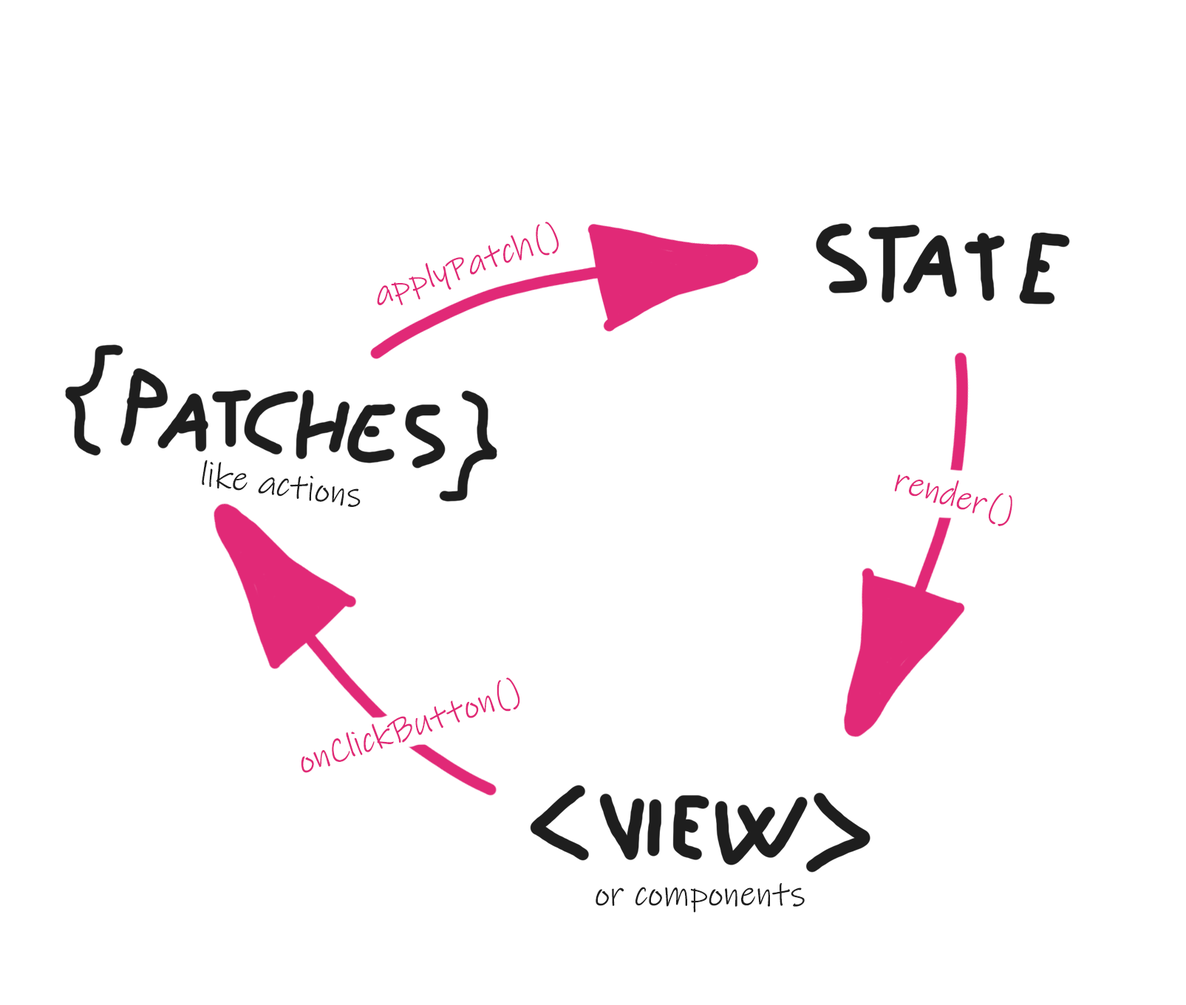
<style>
.page{position:relative;width:1186px;height:1005px;background:#ffffff}
.page>*{position:absolute;margin:0}
.t1{font:35.5px "InkFree";color:#e12977}
.t2{font:35.5px "InkFree";color:#1e1e1e}
</style>
<div class="page">
<p class="t1" style="left:377px;top:222px;width:182px;height:83px;rotate:-18deg">applyPatch()</p>
<p class="t2" style="left:202px;top:460px;width:159px;height:47px;rotate:8deg">like actions</p>
<p class="t1" style="left:894px;top:475px;width:119px;height:51px;rotate:16deg">render()</p>
<p class="t1" style="left:301px;top:678px;width:219px;height:95px;rotate:-18deg">onClickButton()</p>
<p class="t2" style="left:596px;top:883px;width:209px;height:30px">or components</p>
</div>
